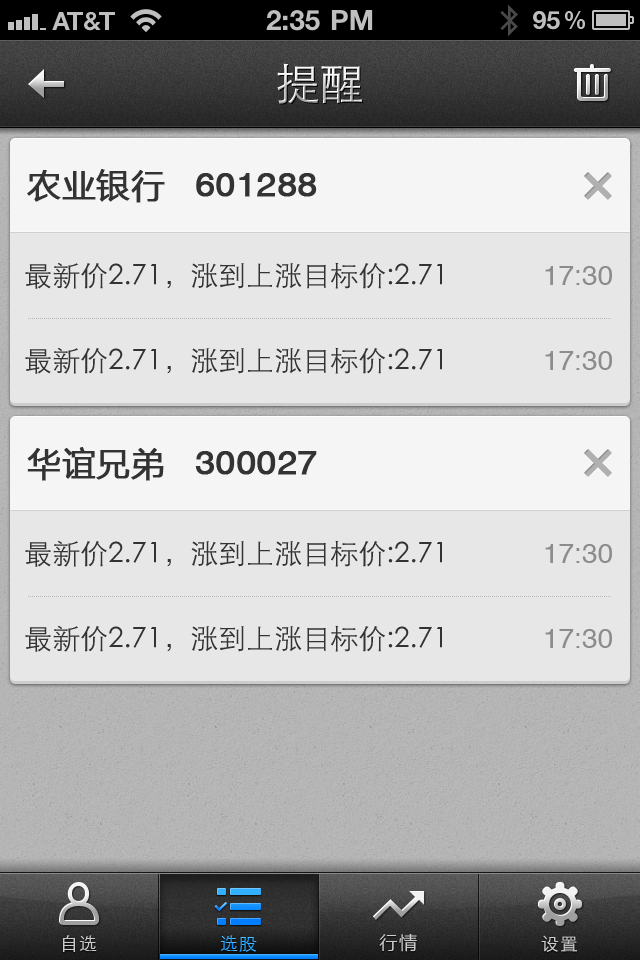
<style>
.page{position:relative;width:640px;height:960px;background:#e7e7e7}
.page>*{position:absolute;margin:0}
.t1{font:44px "STXihei";letter-spacing:0.005em}
.t2{font:33px "MicrosoftYaHei";letter-spacing:0.025em;color:#333333;font-weight:bold}
.t3{font:33.2px "HelveticaCE-Regular";color:#333333;font-weight:bold;scale:1.05 1}
.t4{font:28px "STXihei";color:#333333}
.t5{font:28px "HelveticaCE-Regular";color:#8c8c8c}
.t6{font:18px "STXihei";letter-spacing:0.05em;color:#cccccc}
.t7{font:18px "STXihei";letter-spacing:0.05em}
.t8{font:18px "MicrosoftYaHei";letter-spacing:0.1em;color:#cccccc}
</style>
<div class="page">
<p class="t1" style="left:277px;top:63px;width:85px;height:41px">提醒</p>
<p class="t2" style="left:27px;top:169px;width:138px;height:34px">农业银行</p>
<p class="t3" style="left:196px;top:173px;width:121px;height:24px">601288</p>
<p class="t4" style="left:25px;top:262px;width:417px;height:27px">最新价2.71，涨到上涨目标价:2.71</p>
<p class="t5" style="left:545px;top:266px;width:67px;height:19px">17:30</p>
<p class="t4" style="left:25px;top:347px;width:417px;height:27px">最新价2.71，涨到上涨目标价:2.71</p>
<p class="t5" style="left:545px;top:351px;width:67px;height:19px">17:30</p>
<p class="t2" style="left:27px;top:447px;width:137px;height:34px">华谊兄弟</p>
<p class="t3" style="left:195px;top:451px;width:122px;height:24px">300027</p>
<p class="t4" style="left:25px;top:540px;width:417px;height:27px">最新价2.71，涨到上涨目标价:2.71</p>
<p class="t5" style="left:545px;top:544px;width:67px;height:19px">17:30</p>
<p class="t4" style="left:25px;top:625px;width:417px;height:27px">最新价2.71，涨到上涨目标价:2.71</p>
<p class="t5" style="left:545px;top:629px;width:67px;height:19px">17:30</p>
<p class="t6" style="left:62px;top:935px;width:35px;height:17px">自选</p>
<p class="t7" style="left:220px;top:935px;width:37px;height:17px">选股</p>
<p class="t8" style="left:379px;top:933px;width:38px;height:19px">行情</p>
<p class="t6" style="left:541px;top:935px;width:37px;height:17px">设置</p>
</div>
